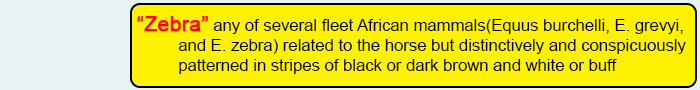
<style>
.page{position:relative;width:700px;height:90px;background:#fff200}
.page>*{position:absolute;margin:0}
.t1{font:16.7px "ArialMT";color:#020202}
.t2{font:20.8px "ArialMT";color:#fd010d;font-weight:bold}
</style>
<div class="page">
<p class="t1" style="left:137px;top:16px;width:549px;height:58px"><span class="t2">“Zebra”</span> any of several fleet African mammals(Equus burchelli, E. grevyi,<br>         and E. zebra) related to the horse but distinctively and conspicuously <br>         patterned in stripes of black or dark brown and white or buff</p>
</div>
